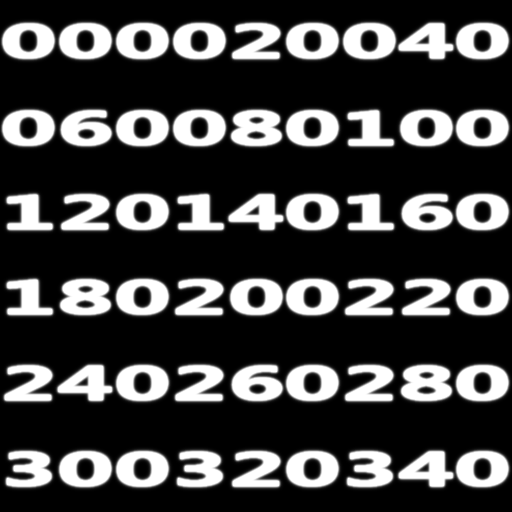
<style>
.page{position:relative;width:512px;height:512px;background:#000000}
.page>*{position:absolute;margin:0}
.t1{font:43.7px "MicrosoftYaHei-Bold";color:#ffffff;scale:2.12 1}
.t2{font:43.7px "MicrosoftYaHei-Bold";color:#ffffff;scale:2.1 1}
</style>
<div class="page">
<p class="t1" style="left:3px;top:24px;width:165px;height:34px">000</p>
<p class="t2" style="left:174px;top:24px;width:164px;height:34px">020</p>
<p class="t2" style="left:344px;top:24px;width:164px;height:34px">040</p>
<p class="t1" style="left:3px;top:111px;width:165px;height:34px">060</p>
<p class="t2" style="left:174px;top:111px;width:164px;height:34px">080</p>
<p class="t2" style="left:348px;top:111px;width:160px;height:34px">100</p>
<p class="t1" style="left:7px;top:195px;width:161px;height:34px">120</p>
<p class="t2" style="left:178px;top:195px;width:160px;height:34px">140</p>
<p class="t2" style="left:348px;top:195px;width:160px;height:34px">160</p>
<p class="t1" style="left:7px;top:280px;width:161px;height:34px">180</p>
<p class="t2" style="left:176px;top:280px;width:162px;height:34px">200</p>
<p class="t2" style="left:346px;top:280px;width:162px;height:34px">220</p>
<p class="t1" style="left:5px;top:366px;width:163px;height:34px">240</p>
<p class="t2" style="left:176px;top:366px;width:162px;height:34px">260</p>
<p class="t2" style="left:346px;top:366px;width:162px;height:34px">280</p>
<p class="t1" style="left:7px;top:452px;width:161px;height:34px">300</p>
<p class="t2" style="left:178px;top:452px;width:160px;height:34px">320</p>
<p class="t2" style="left:348px;top:452px;width:160px;height:34px">340</p>
</div>
